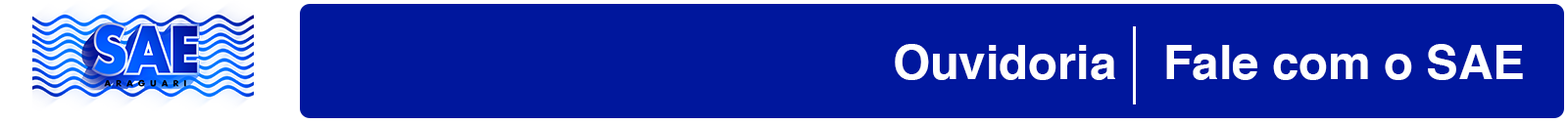
<style>
.page{position:relative;width:1568px;height:124px;background:#00179d}
.page>*{position:absolute;margin:0}
.t1{font:48px "Helvetica-Bold";color:#ffffff}
</style>
<div class="page">
<p class="t1" style="left:895px;top:44px;width:220px;height:36px">Ouvidoria</p>
<p class="t1" style="left:1166px;top:44px;width:357px;height:36px">Fale com o SAE</p>
</div>
